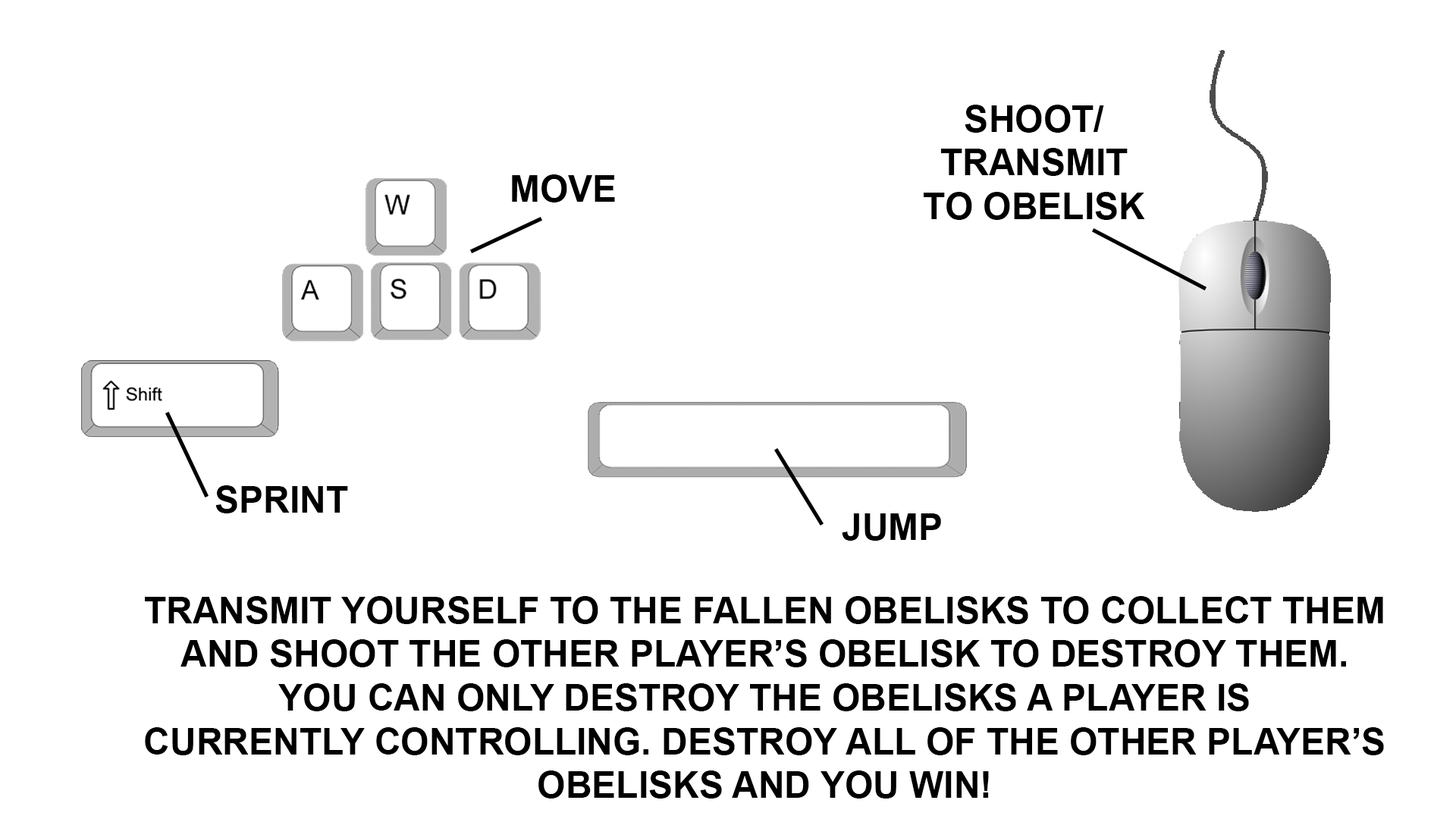
<style>
.page{position:relative;width:1456px;height:819px;background:#ffffff}
.page>*{position:absolute;margin:0}
.t1{font:36.4px "Arial-BoldMT";color:#000000}
</style>
<div class="page">
<p class="t1" style="left:924px;top:105px;width:221px;height:115px;text-align:center">SHOOT/<br>TRANSMIT<br>TO OBELISK</p>
<p class="t1" style="left:512px;top:174px;width:103px;height:28px">MOVE</p>
<p class="t1" style="left:215px;top:485px;width:133px;height:28px">SPRINT</p>
<p class="t1" style="left:842px;top:513px;width:99px;height:28px">JUMP</p>
<p class="t1" style="left:145px;top:596px;width:1239px;height:203px;text-align:center">TRANSMIT YOURSELF TO THE FALLEN OBELISKS TO COLLECT THEM AND SHOOT THE OTHER PLAYER’S OBELISK TO DESTROY THEM. YOU CAN ONLY DESTROY THE OBELISKS A PLAYER IS <br>CURRENTLY CONTROLLING. DESTROY ALL OF THE OTHER PLAYER’S OBELISKS AND YOU WIN!</p>
</div>
